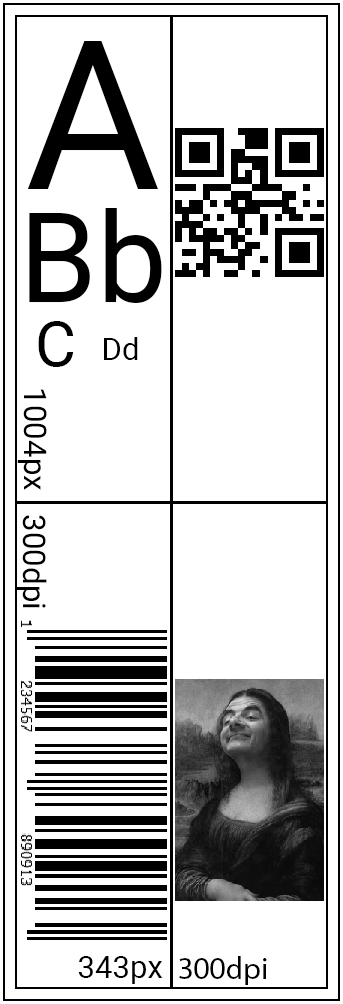
<style>
.page{position:relative;width:343px;height:1004px;background:#ffffff}
.page>*{position:absolute;margin:0}
.t1{font:208.3px "Roboto-Regular";color:#000000}
.t2{font:125px "Roboto-Regular";color:#000000}
.t3{font:62.5px "Roboto-Regular";color:#000000}
.t4{font:31.2px "Roboto-Regular";color:#000000}
.t5{font:31.2px "MyriadPro-Regular";color:#000000}
</style>
<div class="page">
<p class="t1" style="left:27px;top:41px;width:131px;height:148px">A</p>
<p class="t2" style="left:29px;top:208px;width:133px;height:95px">Bb</p>
<p class="t3" style="left:38px;top:321px;width:36px;height:46px">C</p>
<p class="t4" style="left:104px;top:337px;width:34px;height:23px">Dd</p>
<p class="t4" style="left:17px;top:389px;width:30px;height:101px;rotate:90deg">1004px</p>
<p class="t4" style="left:16px;top:515px;width:31px;height:93px;rotate:90deg">300dpi</p>
<p class="t4" style="left:78px;top:956px;width:85px;height:28px">343px</p>
<p class="t5" style="left:179px;top:956px;width:88px;height:29px">300dpi</p>
</div>
